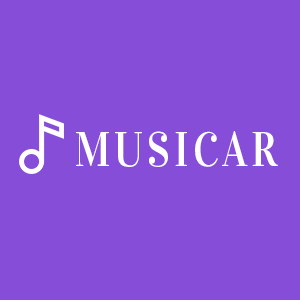
<style>
.page{position:relative;width:300px;height:300px;background:#864dd9}
.page>*{position:absolute;margin:0}
.t1{font:48.4px "Vidaloka-Regular";letter-spacing:0.1em;color:#ffffff;text-transform:uppercase;scale:0.86 1}
</style>
<div class="page">
<p class="t1" style="left:76px;top:131px;width:202px;height:36px">Musicar</p>
</div>
